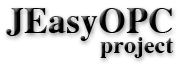
<style>
.page{position:relative;width:186px;height:67px;background:#ffffff}
.page>*{position:absolute;margin:0}
.t1{font:36px "RomanticBold";color:#000000}
.t2{font:24px "RomanticBold";color:#000000}
</style>
<div class="page">
<p class="t1" style="left:6px;top:8px;width:166px;height:33px">JEasyOPC</p>
<p class="t2" style="left:100px;top:37px;width:73px;height:21px">project</p>
</div>
